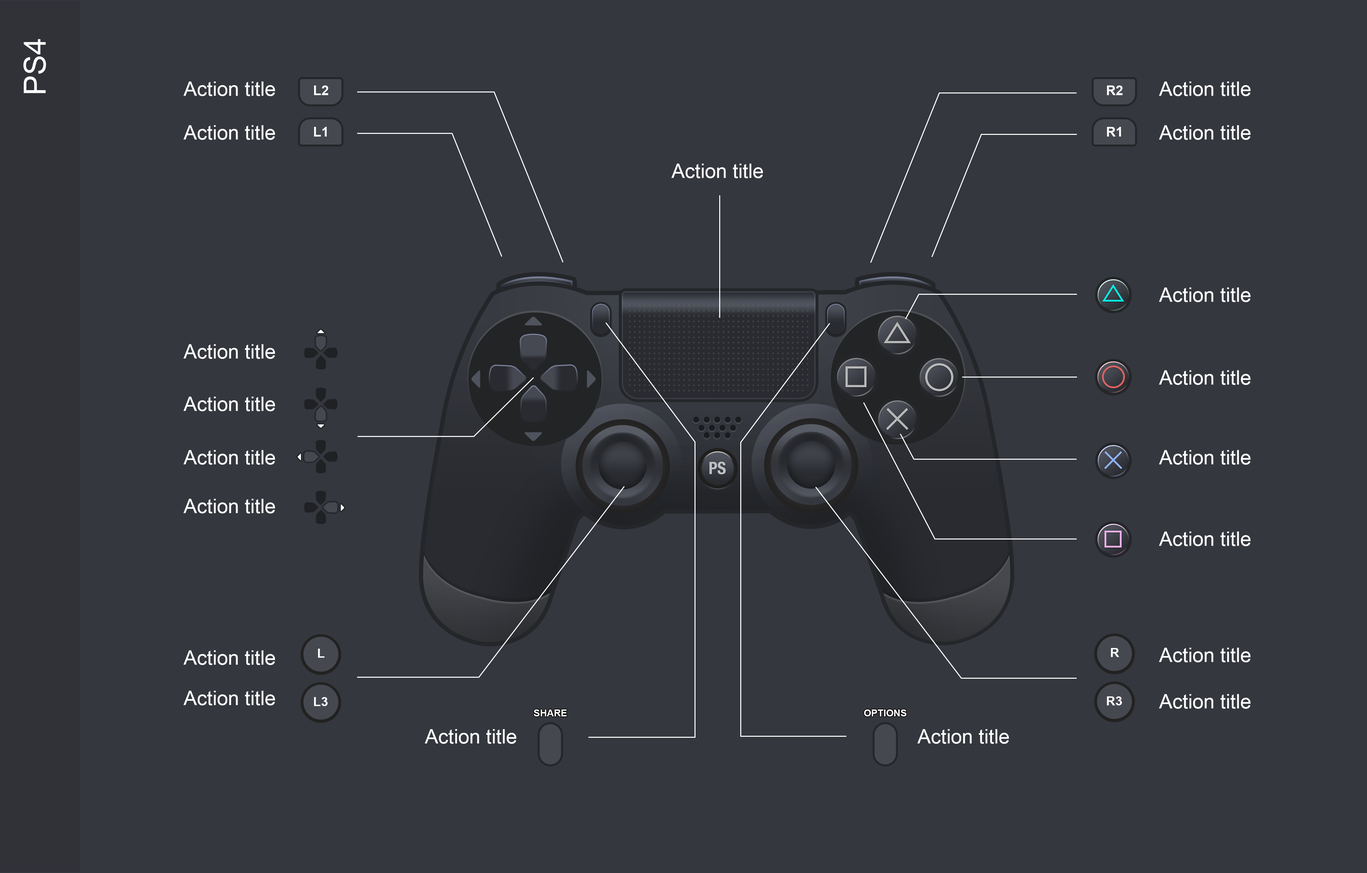
<style>
.page{position:relative;width:1367px;height:873px;background:#35373e}
.page>*{position:absolute;margin:0}
.t1{font:30.5px "ArialMT";color:#ffffff}
.t2{font:20px "ArialMT";color:#ffffff}
.t3{font:13.3px "Arial-BoldMT";color:#ffffff}
.t4{font:12.8px "Arial-BoldMT";color:#ffffff}
.t5{font:9.6px "Arial-BoldMT";color:#ffffff}
</style>
<div class="page">
<p class="t1" style="left:23px;top:39px;width:23px;height:54px;rotate:-90deg">PS4</p>
<p class="t2" style="left:183px;top:81px;width:92px;height:15px">Action title</p>
<p class="t3" style="left:314px;top:85px;width:14px;height:10px">L2</p>
<p class="t3" style="left:1107px;top:85px;width:15px;height:10px">R2</p>
<p class="t2" style="left:1158px;top:81px;width:92px;height:15px">Action title</p>
<p class="t2" style="left:183px;top:125px;width:92px;height:15px">Action title</p>
<p class="t2" style="left:1158px;top:125px;width:92px;height:15px">Action title</p>
<p class="t3" style="left:314px;top:127px;width:13px;height:9px">L1</p>
<p class="t3" style="left:1107px;top:127px;width:14px;height:9px">R1</p>
<p class="t2" style="left:671px;top:163px;width:92px;height:15px">Action title</p>
<p class="t2" style="left:1158px;top:287px;width:92px;height:15px">Action title</p>
<p class="t2" style="left:183px;top:344px;width:92px;height:15px">Action title</p>
<p class="t2" style="left:1158px;top:370px;width:92px;height:15px">Action title</p>
<p class="t2" style="left:183px;top:396px;width:92px;height:15px">Action title</p>
<p class="t2" style="left:183px;top:450px;width:92px;height:14px">Action title</p>
<p class="t2" style="left:1158px;top:450px;width:92px;height:14px">Action title</p>
<p class="t2" style="left:183px;top:498px;width:92px;height:15px">Action title</p>
<p class="t2" style="left:1158px;top:531px;width:92px;height:15px">Action title</p>
<p class="t2" style="left:183px;top:650px;width:92px;height:15px">Action title</p>
<p class="t4" style="left:318px;top:648px;width:7px;height:9px">L</p>
<p class="t4" style="left:1110px;top:648px;width:9px;height:9px">R</p>
<p class="t2" style="left:1158px;top:647px;width:92px;height:15px">Action title</p>
<p class="t2" style="left:183px;top:690px;width:92px;height:15px">Action title</p>
<p class="t4" style="left:314px;top:697px;width:14px;height:9px">L3</p>
<p class="t4" style="left:1106px;top:696px;width:16px;height:9px">R3</p>
<p class="t2" style="left:1158px;top:694px;width:92px;height:14px">Action title</p>
<p class="t5" style="left:534px;top:709px;width:33px;height:7px">SHARE</p>
<p class="t5" style="left:864px;top:709px;width:42px;height:7px">OPTIONS</p>
<p class="t2" style="left:424px;top:729px;width:92px;height:14px">Action title</p>
<p class="t2" style="left:917px;top:729px;width:92px;height:14px">Action title</p>
</div>
